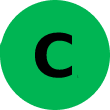
<style>
.page{position:relative;width:110px;height:110px;background:#00b553}
.page>*{position:absolute;margin:0}
.t1{font:60px "DejaVuSans-Bold";color:#000000}
</style>
<div class="page">
<p class="t1" style="left:34px;top:32px;width:39px;height:46px">C</p>
</div>
